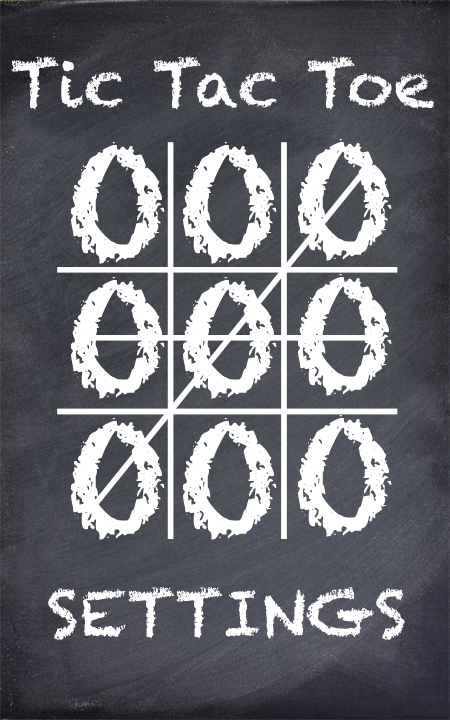
<style>
.page{position:relative;width:450px;height:720px}
.page>*{position:absolute;margin:0}
.t1{font:65px "Chalkduster";color:#ffffff}
.t2{font:146px "Chalkduster";color:#ffffff}
.t3{font:63px "Chalkduster";color:#ffffff}
</style>
<div class="page">
<p class="t1" style="left:11px;top:56px;width:423px;height:54px">Tic Tac Toe</p>
<p class="t2" style="left:71px;top:142px;width:94px;height:122px">O</p>
<p class="t2" style="left:183px;top:142px;width:94px;height:122px">O</p>
<p class="t2" style="left:298px;top:139px;width:94px;height:122px">O</p>
<p class="t2" style="left:71px;top:277px;width:94px;height:122px">O</p>
<p class="t2" style="left:183px;top:277px;width:94px;height:122px">O</p>
<p class="t2" style="left:298px;top:274px;width:94px;height:122px">O</p>
<p class="t2" style="left:71px;top:418px;width:94px;height:122px">O</p>
<p class="t2" style="left:183px;top:418px;width:94px;height:122px">O</p>
<p class="t2" style="left:298px;top:415px;width:94px;height:122px">O</p>
<p class="t3" style="left:48px;top:587px;width:357px;height:53px">SETTINGS</p>
</div>
